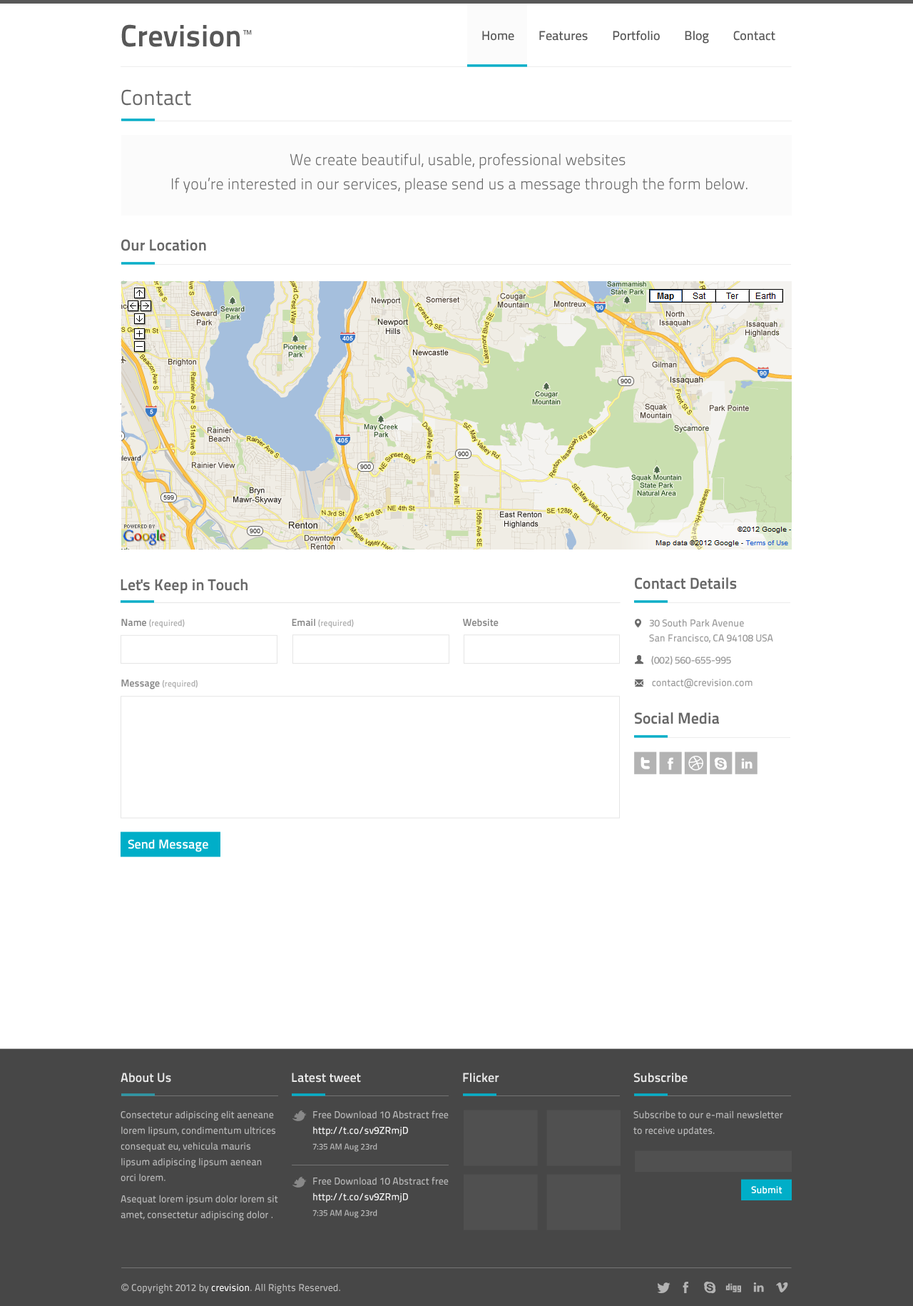
<style>
.page{position:relative;width:913px;height:1306px;background:#ffffff}
.page>*{position:absolute;margin:0}
.t1{font:12.8px "TitilliumText22L-Medium";color:#585858}
.t2{font:21.4px "TitilliumText22L-Regular";color:#686868}
.t3{font:15.7px/24.2px "TitilliumText22L-Light";color:#686868}
.t4{font:15.7px "TitilliumText22L-Bold";color:#686868}
.t5{font:8.6px "TitilliumText22L-Bold";color:#b3b3b3}
.t6{font:10px "TitilliumText22L-Bold";color:#868686}
.t7{font:10px/15px "TitilliumText22L-Medium";color:#999999}
.t8{font:10px "TitilliumText22L-Medium";color:#999999}
.t9{font:11.4px "TitilliumText22L-Regular";color:#686868}
.t10{font:12.8px "TitilliumText22L-Bold";color:#ffffff}
.t11{font:12.8px "TitilliumText22L-Bold";color:#e8e8e8}
.t12{font:10px/15.7px "TitilliumText22L-Medium";color:#b9b9b9}
.t13{font:10px/15.7px "TitilliumText22L-Medium";color:#fafafa}
.t14{font:8.6px/15.7px "TitilliumText22L-Medium";color:#b9b9b9}
.t15{font:10px "TitilliumText22L-Bold";color:#ffffff}
.t16{font:10px "TitilliumText22L-Medium";color:#b9b9b9}
.t17{font:10px "ArialMT";color:#b9b9b9}
.t18{font:10px "TitilliumText22L-Medium";color:#fafafa}
</style>
<div class="page">
<p class="t1" style="left:482px;top:31px;width:294px;height:13px">Home        Features        Portfolio        Blog        Contact</p>
<p class="t2" style="left:121px;top:89px;width:70px;height:17px">Contact</p>
<p class="t3" style="left:172px;top:153px;width:576px;height:40px;text-align:center">We create beautiful, usable, professional websites <br> If you’re interested in our services, please send us a message through the form below.</p>
<p class="t4" style="left:121px;top:239px;width:85px;height:12px">Our Location</p>
<p class="t4" style="left:121px;top:579px;width:127px;height:15px">Let's Keep in Touch</p>
<p class="t4" style="left:635px;top:577px;width:102px;height:12px">Contact Details</p>
<p class="t5" style="left:121px;top:619px;width:64px;height:9px"><span class="t6">Name </span>(required)</p>
<p class="t5" style="left:292px;top:619px;width:62px;height:9px"><span class="t6">Email </span>(required)</p>
<p class="t6" style="left:463px;top:619px;width:36px;height:7px">Website</p>
<p class="t7" style="left:649px;top:619px;width:124px;height:24px">30 South Park Avenue<br>San Francisco, CA 94108 USA</p>
<p class="t8" style="left:651px;top:656px;width:80px;height:9px">(002) 560-655-995</p>
<p class="t5" style="left:121px;top:679px;width:77px;height:10px"><span class="t6">Message </span>(required)</p>
<p class="t8" style="left:652px;top:679px;width:101px;height:9px"><span class="t9"> </span>contact@crevision.com</p>
<p class="t4" style="left:634px;top:712px;width:86px;height:12px">Social Media</p>
<p class="t10" style="left:128px;top:839px;width:80px;height:13px">Send Message</p>
<p class="t11" style="left:121px;top:1072px;width:50px;height:10px">About Us</p>
<p class="t11" style="left:292px;top:1072px;width:69px;height:10px">Latest tweet</p>
<p class="t11" style="left:463px;top:1072px;width:36px;height:10px">Flicker</p>
<p class="t11" style="left:634px;top:1072px;width:54px;height:10px">Subscribe</p>
<p class="t12" style="left:121px;top:1110px;width:157px;height:111px">Consectetur adipiscing elit aeneane lorem lipsum, condimentum ultrices consequat eu, vehicula mauris lipsum adipiscing lipsum aenean orci lorem.<br><br>Asequat lorem ipsum dolor lorem sit amet, consectetur adipiscing dolor .</p>
<p class="t12" style="left:313px;top:1110px;width:136px;height:42px">Free Download 10 Abstract free<br><span class="t13">http://t.co/sv9ZRmjD <br></span><span class="t14">7:35 AM Aug 23rd</span></p>
<p class="t12" style="left:634px;top:1110px;width:149px;height:26px">Subscribe to our e-mail newsletter to receive updates.</p>
<p class="t12" style="left:313px;top:1177px;width:136px;height:41px">Free Download 10 Abstract free<br><span class="t13">http://t.co/sv9ZRmjD <br></span><span class="t14">7:35 AM Aug 23rd</span></p>
<p class="t15" style="left:751px;top:1186px;width:32px;height:8px">Submit</p>
<p class="t16" style="left:121px;top:1283px;width:219px;height:11px"><span class="t17">© </span>Copyright 2012 by <span class="t18">crevision</span>. All Rights Reserved.</p>
</div>
